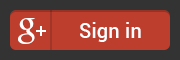
<style>
.page{position:relative;width:180px;height:60px;background:#be3e2e}
.page>*{position:absolute;margin:0}
.t1{font:20px "Roboto-Medium";letter-spacing:0.01em;color:#ffffff}
</style>
<div class="page">
<p class="t1" style="left:80px;top:22px;width:61px;height:20px">Sign in</p>
</div>
